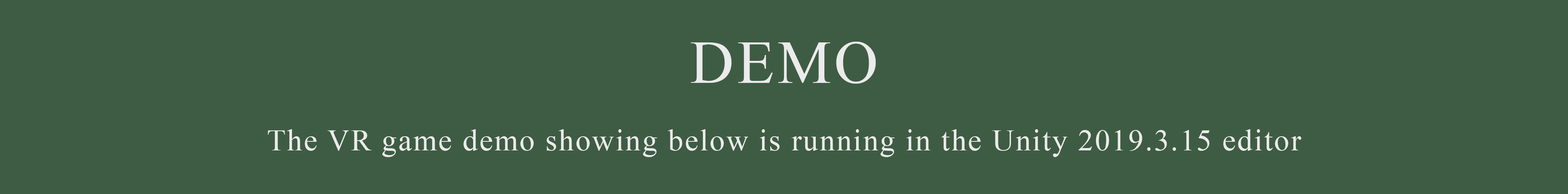
<style>
.page{position:relative;width:1568px;height:194px;background:#3e5c43}
.page>*{position:absolute;margin:0}
.t1{font:60.8px "TimesNewRomanPSMT";letter-spacing:0.05em;color:#ebebeb}
.t2{font:30.4px "TimesNewRomanPSMT";letter-spacing:0.05em;color:#ebebeb}
</style>
<div class="page">
<p class="t1" style="left:691px;top:42px;width:185px;height:41px">DEMO</p>
<p class="t2" style="left:268px;top:129px;width:1033px;height:28px">The VR game demo showing below is running in the Unity 2019.3.15 editor</p>
</div>
